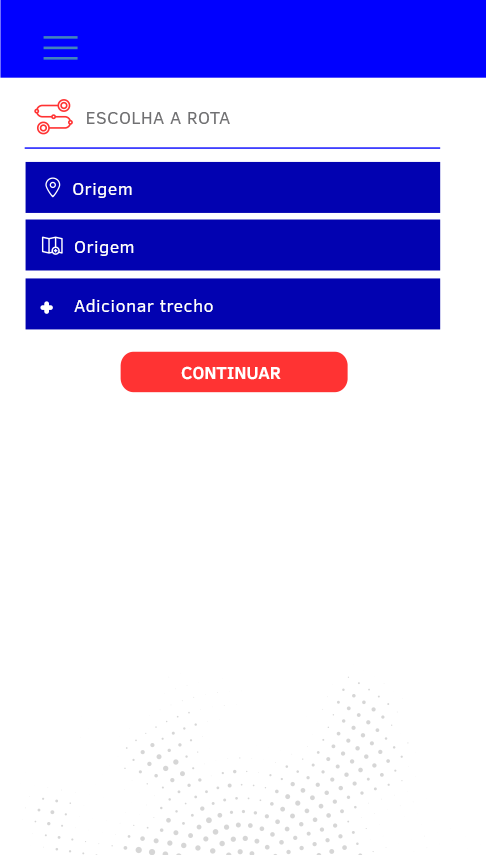
<style>
.page{position:relative;width:486px;height:855px;background:#ffffff}
.page>*{position:absolute;margin:0}
.t1{font:18px "ClearSans";letter-spacing:0.02em;color:#707072}
.t2{font:18px "ClearSans";letter-spacing:0.025em;color:#ffffff}
.t3{font:17.6px "ClearSans-Bold";color:#ffffff}
</style>
<div class="page">
<p class="t1" style="left:87px;top:112px;width:143px;height:12px">ESCOLHA A ROTA</p>
<p class="t2" style="left:73px;top:183px;width:59px;height:15px">Origem</p>
<p class="t2" style="left:75px;top:241px;width:59px;height:15px">Origem</p>
<p class="t2" style="left:74px;top:299px;width:139px;height:13px">Adicionar trecho</p>
<p class="t3" style="left:181px;top:366px;width:100px;height:14px">CONTINUAR</p>
</div>
